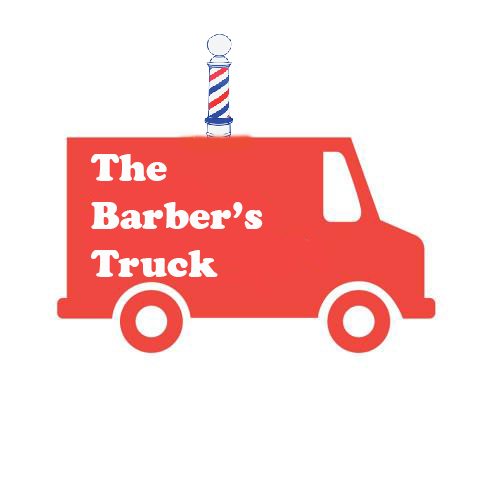
<style>
.page{position:relative;width:480px;height:480px;background:#ffffff}
.page>*{position:absolute;margin:0}
.t1{font:40px "CooperBlack";color:#fdfcfc}
</style>
<div class="page">
<p class="t1" style="left:91px;top:154px;width:172px;height:123px">The<br>Barber’s<br>Truck</p>
</div>
